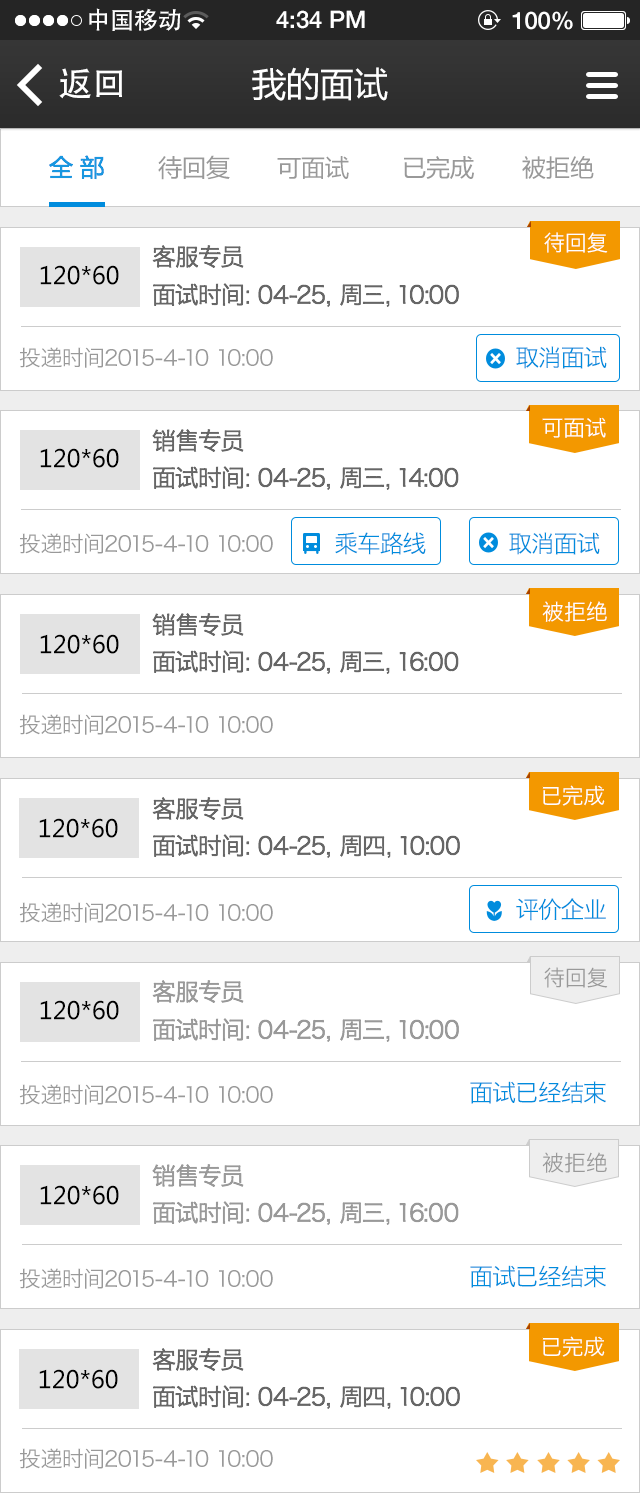
<style>
.page{position:relative;width:640px;height:1493px;background:#ffffff}
.page>*{position:absolute;margin:0}
.t1{font:24px "AdobeHeitiStd-Regular";color:#ffffff}
.t2{font:24px "HelveticaNeue-Medium";color:#ffffff}
.t3{font:34px "AdobeHeitiStd-Regular";color:#ffffff}
.t4{font:34px "MicrosoftYaHei";color:#ffffff}
.t5{font:24px "MicrosoftYaHei";color:#1997e0}
.t6{font:24px "MicrosoftYaHei";color:#999999}
.t7{font:22px "HiraginoSansGB-W3";color:#ffffff}
.t8{font:24px "HiraginoSansGB-W3";color:#666666}
.t9{font:24px "MicrosoftYaHei";color:#000000}
.t10{font:24px "HiraginoSansGB-W3";letter-spacing:-0.025em;color:#666666}
.t11{font:22px "HiraginoSansGB-W3";letter-spacing:-0.025em;color:#999999}
.t12{font:24px "HiraginoSansGB-W3";letter-spacing:-0.05em;color:#008cdd}
.t13{font:22px "HiraginoSansGB-W3";color:#999999}
.t14{font:24px "HiraginoSansGB-W3";color:#999999}
.t15{font:24px "HiraginoSansGB-W3";letter-spacing:-0.025em;color:#999999}
</style>
<div class="page">
<p class="t1" style="left:89px;top:8px;width:92px;height:23px">中国移动</p>
<p class="t2" style="left:276px;top:10px;width:89px;height:19px">4:34 PM</p>
<p class="t2" style="left:512px;top:11px;width:61px;height:19px">100%</p>
<p class="t3" style="left:59px;top:68px;width:63px;height:31px">返回</p>
<p class="t4" style="left:252px;top:67px;width:136px;height:34px">我的面试</p>
<p class="t5" style="left:49px;top:155px;width:55px;height:25px">全 部</p>
<p class="t6" style="left:158px;top:155px;width:72px;height:25px">待回复</p>
<p class="t6" style="left:277px;top:156px;width:72px;height:23px">可面试</p>
<p class="t6" style="left:404px;top:156px;width:70px;height:23px">已完成</p>
<p class="t6" style="left:522px;top:156px;width:72px;height:23px">被拒绝</p>
<p class="t7" style="left:544px;top:232px;width:64px;height:21px">待回复</p>
<p class="t8" style="left:152px;top:245px;width:92px;height:23px">客服专员</p>
<p class="t9" style="left:40px;top:265px;width:79px;height:20px">120*60</p>
<p class="t10" style="left:153px;top:283px;width:306px;height:24px">面试时间：04-25，周三，10:00</p>
<p class="t11" style="left:19px;top:347px;width:254px;height:21px">投递时间2015-4-10 10:00</p>
<p class="t12" style="left:516px;top:346px;width:91px;height:23px">取消面试</p>
<p class="t7" style="left:542px;top:417px;width:64px;height:21px">可面试</p>
<p class="t8" style="left:152px;top:429px;width:92px;height:23px">销售专员</p>
<p class="t9" style="left:40px;top:448px;width:79px;height:20px">120*60</p>
<p class="t10" style="left:153px;top:466px;width:306px;height:24px">面试时间：04-25，周三，14:00</p>
<p class="t11" style="left:19px;top:533px;width:254px;height:21px">投递时间2015-4-10 10:00</p>
<p class="t12" style="left:335px;top:532px;width:91px;height:23px">乘车路线</p>
<p class="t12" style="left:509px;top:532px;width:91px;height:23px">取消面试</p>
<p class="t7" style="left:542px;top:601px;width:65px;height:21px">被拒绝</p>
<p class="t8" style="left:152px;top:613px;width:92px;height:23px">销售专员</p>
<p class="t9" style="left:40px;top:634px;width:79px;height:20px">120*60</p>
<p class="t10" style="left:153px;top:650px;width:306px;height:24px">面试时间：04-25，周三，16:00</p>
<p class="t11" style="left:19px;top:714px;width:254px;height:21px">投递时间2015-4-10 10:00</p>
<p class="t7" style="left:542px;top:785px;width:63px;height:21px">已完成</p>
<p class="t8" style="left:152px;top:797px;width:92px;height:23px">客服专员</p>
<p class="t9" style="left:39px;top:818px;width:79px;height:20px">120*60</p>
<p class="t10" style="left:153px;top:834px;width:307px;height:24px">面试时间：04-25，周四，10:00</p>
<p class="t11" style="left:19px;top:902px;width:254px;height:21px">投递时间2015-4-10 10:00</p>
<p class="t12" style="left:516px;top:898px;width:90px;height:23px">评价企业</p>
<p class="t13" style="left:544px;top:967px;width:64px;height:21px">待回复</p>
<p class="t14" style="left:152px;top:980px;width:92px;height:23px">客服专员</p>
<p class="t9" style="left:40px;top:1000px;width:79px;height:20px">120*60</p>
<p class="t15" style="left:153px;top:1018px;width:306px;height:24px">面试时间：04-25，周三，10:00</p>
<p class="t11" style="left:19px;top:1084px;width:254px;height:21px">投递时间2015-4-10 10:00</p>
<p class="t12" style="left:470px;top:1081px;width:136px;height:23px">面试已经结束</p>
<p class="t13" style="left:542px;top:1152px;width:65px;height:21px">被拒绝</p>
<p class="t14" style="left:152px;top:1164px;width:92px;height:23px">销售专员</p>
<p class="t9" style="left:40px;top:1185px;width:79px;height:20px">120*60</p>
<p class="t15" style="left:153px;top:1201px;width:306px;height:24px">面试时间：04-25，周三，16:00</p>
<p class="t12" style="left:470px;top:1265px;width:136px;height:23px">面试已经结束</p>
<p class="t11" style="left:19px;top:1268px;width:254px;height:21px">投递时间2015-4-10 10:00</p>
<p class="t7" style="left:542px;top:1336px;width:63px;height:21px">已完成</p>
<p class="t8" style="left:152px;top:1348px;width:92px;height:23px">客服专员</p>
<p class="t9" style="left:39px;top:1369px;width:79px;height:20px">120*60</p>
<p class="t10" style="left:153px;top:1385px;width:307px;height:24px">面试时间：04-25，周四，10:00</p>
<p class="t11" style="left:19px;top:1448px;width:254px;height:21px">投递时间2015-4-10 10:00</p>
</div>
